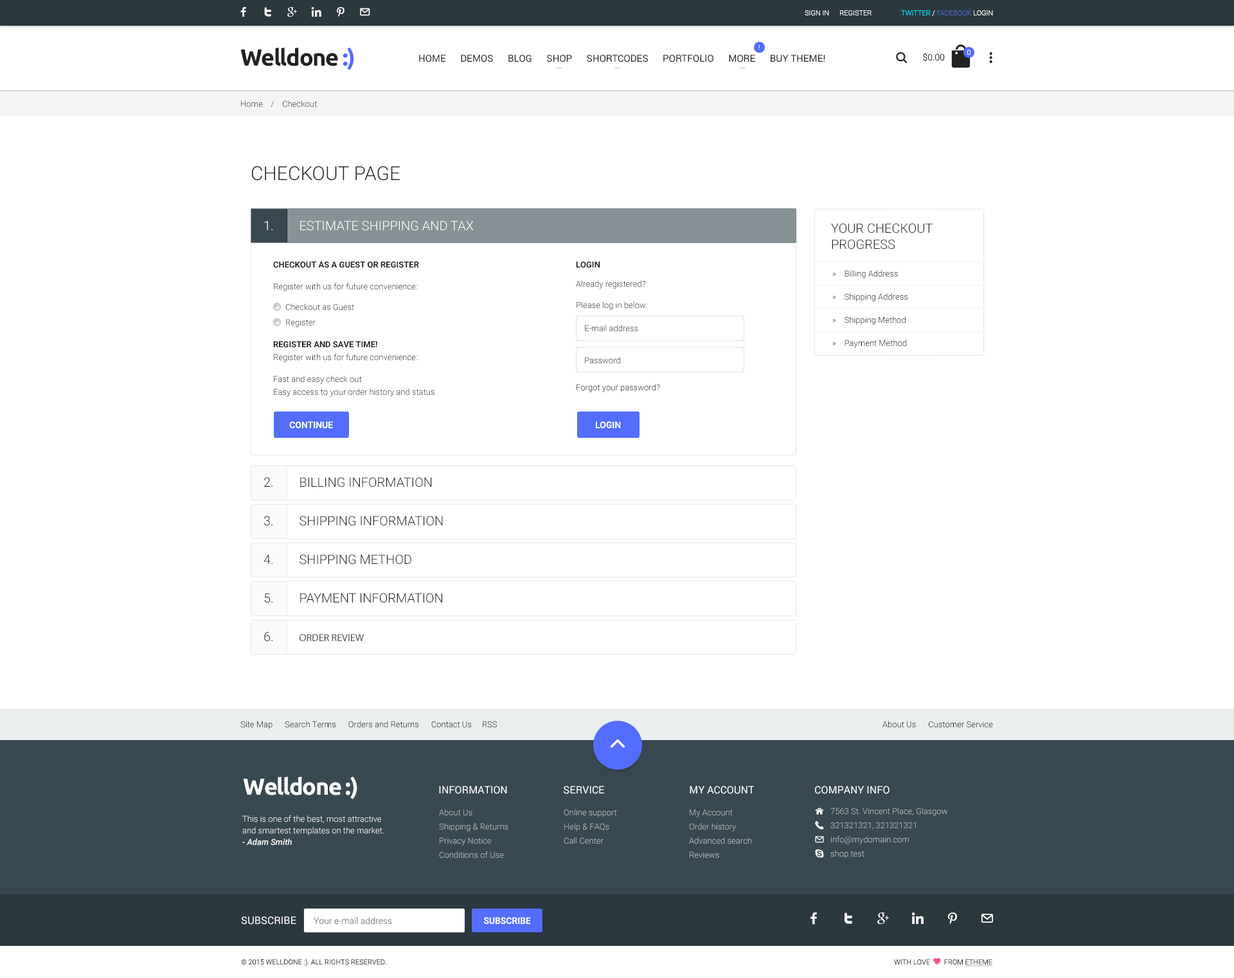
<style>
.page{position:relative;width:1234px;height:978px;background:#ffffff}
.page>*{position:absolute;margin:0}
.t1{font:7.1px "Roboto-Light";color:#ffffff}
.t2{font:7.1px "Roboto-Light";color:#526ac4}
.t3{font:7.1px "Roboto-Light";color:#00e4ff}
.t4{font:23.1px "Ubuntu-Bold";letter-spacing:-0.04em;color:#212121}
.t5{font:23.1px "Ubuntu-Bold";letter-spacing:-0.04em;color:#536dfe}
.t6{font:6.4px "Roboto-Regular"}
.t7{font:9px "Roboto-Light";color:#212121}
.t8{font:9.6px "Roboto-Regular";color:#212121}
.t9{font:8.4px "Roboto-Light";color:#2b2b2b}
.t10{font:19.3px "Roboto-Light";color:#212121;text-transform:uppercase}
.t11{font:12.9px "Roboto-Light";color:#ffffff}
.t12{font:12.9px/16.1px "Roboto-Light";color:#212121;text-transform:uppercase}
.t13{font:8.4px/12.9px "Roboto-Light";color:#212121}
.t14{font:8.4px/14.1px "Roboto-Bold";color:#212121;text-transform:uppercase}
.t15{font:8.4px/7.7px "Roboto-Light";color:#212121}
.t16{font:8.4px/20.6px "Roboto-Light";color:#212121}
.t17{font:8.4px/15.4px "Roboto-Light";color:#212121}
.t18{font:8.4px/21.9px "Roboto-Bold";color:#212121;text-transform:uppercase}
.t19{font:8.4px/21.9px "Roboto-Light";color:#212121}
.t20{font:8.4px/21.2px "Roboto-Light";color:#212121}
.t21{font:8.4px/12.9px "Roboto-Bold";color:#212121;text-transform:uppercase}
.t22{font:8.4px/6.4px "Roboto-Light";color:#212121}
.t23{font:8.4px/23.1px "Roboto-Light";color:#000000}
.t24{font:8.4px "Roboto-Light";color:#212121}
.t25{font:8.4px "Roboto-Light"}
.t26{font:8.4px "Roboto-Light";color:#000000}
.t27{font:9px "Roboto-Medium";color:#ffffff;text-transform:uppercase}
.t28{font:12.9px "Roboto-Light";color:#212121}
.t29{font:10.3px "MyriadPro-Regular";color:#4c4c4c}
.t30{font:23.1px "Ubuntu-Bold";letter-spacing:-0.04em;color:#ffffff}
.t31{font:10.3px "Roboto-Regular";color:#ffffff;text-transform:uppercase}
.t32{font:8.4px/14.1px "Roboto-Light";color:#bbc2c6}
.t33{font:8.4px/11.6px "Roboto-Light";color:#ffffff}
.t34{font:8.4px/11.6px "Roboto-MediumItalic";color:#ffffff}
.t35{font:9px "Roboto-Light";color:#848484}
.t36{font:7.1px "Roboto-Light";color:#2b2b2b;text-transform:uppercase}
</style>
<div class="page">
<p class="t1" style="left:805px;top:10px;width:67px;height:5px">SIGN IN      REGISTER</p>
<p class="t2" style="left:901px;top:10px;width:92px;height:6px"><span class="t3">TWITTER </span><span class="t1">/ </span>FACEBOOK <span class="t1">LOGIN</span></p>
<p class="t4" style="left:240px;top:47px;width:114px;height:23px">Welldone <span class="t5">:)</span></p>
<p class="t6" style="left:759px;top:44px;width:1px;height:6px">!</p>
<p class="t7" style="left:923px;top:53px;width:22px;height:9px">$0.00</p>
<p class="t1" style="left:967px;top:50px;width:4px;height:5px">0</p>
<p class="t8" style="left:419px;top:55px;width:406px;height:7px">HOME      DEMOS      BLOG      SHOP      SHORTCODES      PORTFOLIO      MORE      BUY THEME!</p>
<p class="t9" style="left:241px;top:100px;width:76px;height:7px">Home    /    Checkout</p>
<p class="t10" style="left:252px;top:166px;width:148px;height:15px">Checkout Page</p>
<p class="t11" style="left:264px;top:221px;width:210px;height:10px">1.     ESTIMATE SHIPPING AND TAX</p>
<p class="t12" style="left:831px;top:223px;width:102px;height:26px">Your Checkout <br>Progress</p>
<p class="t13" style="left:273px;top:261px;width:162px;height:136px"><span class="t14">Checkout as a Guest or Register<br><br></span><span class="t15">Register with us for future convenience:<br></span><span class="t16">      Checkout as Guest<br></span><span class="t17">      Register<br></span><span class="t18">Register and save time!<br></span>Register with us for future convenience:<br><span class="t19">Fast and easy check out<br></span>Easy access to your order history and status</p>
<p class="t20" style="left:576px;top:261px;width:71px;height:49px"><span class="t21">Login<br><br></span><span class="t22">Already registered?<br></span>Please log in below:</p>
<p class="t23" style="left:833px;top:270px;width:75px;height:78px">»    Billing Address<br>»    Shipping Address<br>»    Shipping Method<br>»    Payment Method</p>
<p class="t24" style="left:585px;top:325px;width:53px;height:7px">E-mail address</p>
<p class="t25" style="left:585px;top:357px;width:35px;height:7px">Password</p>
<p class="t26" style="left:577px;top:384px;width:83px;height:8px">Forgot your password?</p>
<p class="t27" style="left:289px;top:421px;width:44px;height:7px">Continue</p>
<p class="t27" style="left:596px;top:421px;width:25px;height:7px">Login</p>
<p class="t28" style="left:264px;top:477px;width:168px;height:10px">2.     BILLING INFORMATION</p>
<p class="t28" style="left:264px;top:516px;width:179px;height:10px">3.     SHIPPING INFORMATION</p>
<p class="t28" style="left:264px;top:554px;width:147px;height:10px">4.     SHIPPING METHOD</p>
<p class="t28" style="left:264px;top:593px;width:178px;height:10px">5.     PAYMENT INFORMATION</p>
<p class="t29" style="left:264px;top:631px;width:101px;height:11px"><span class="t28">6.     </span>ORDER REVIEW</p>
<p class="t26" style="left:240px;top:721px;width:257px;height:8px">Site Map      Search Terms      Orders and Returns      Contact Us     RSS</p>
<p class="t26" style="left:883px;top:721px;width:110px;height:7px">About Us      Customer Service</p>
<p class="t30" style="left:243px;top:776px;width:114px;height:23px">Welldone :)</p>
<p class="t31" style="left:439px;top:786px;width:68px;height:8px">Information</p>
<p class="t31" style="left:564px;top:786px;width:40px;height:8px">service</p>
<p class="t31" style="left:690px;top:786px;width:64px;height:8px">My account</p>
<p class="t31" style="left:815px;top:786px;width:75px;height:8px">Company Info</p>
<p class="t32" style="left:439px;top:809px;width:70px;height:49px">About Us<br>Shipping &amp; Returns<br>Privacy Notice<br>Conditions of Use</p>
<p class="t32" style="left:564px;top:809px;width:53px;height:35px">Online support<br>Help &amp; FAQs<br>Call Center</p>
<p class="t32" style="left:689px;top:809px;width:63px;height:49px">My Account<br>Order history<br>Advanced search<br>Reviews</p>
<p class="t32" style="left:831px;top:807px;width:117px;height:51px">7563 St. Vincent Place, Glasgow<br>321321321, 321321321<br>info@mydomain.com<br>shop.test</p>
<p class="t33" style="left:242px;top:815px;width:142px;height:30px">This is one of the best, most attractive and smartest templates on the market. <br><span class="t34">- Adam Smith</span></p>
<p class="t31" style="left:241px;top:916px;width:55px;height:8px">Subscribe</p>
<p class="t35" style="left:314px;top:917px;width:78px;height:7px">Your e-mail address</p>
<p class="t27" style="left:483px;top:917px;width:48px;height:7px">SUBSCRIBE</p>
<p class="t36" style="left:241px;top:959px;width:145px;height:7px">© 2015 Welldone :). All Rights Reserved.</p>
</div>
